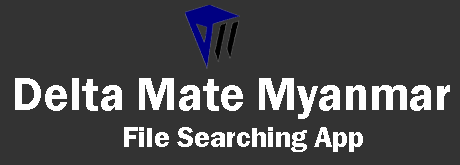
<style>
.page{position:relative;width:460px;height:165px;background:#333333}
.page>*{position:absolute;margin:0}
.t1{font:47.6px "FranklinGothic-Demi";color:#ffffff}
.t2{font:29.1px "FranklinGothic-Demi";color:#ffffff}
</style>
<div class="page">
<p class="t1" style="left:15px;top:78px;width:435px;height:41px">Delta Mate Myanmar</p>
<p class="t2" style="left:124px;top:127px;width:239px;height:25px">File Searching App</p>
</div>
